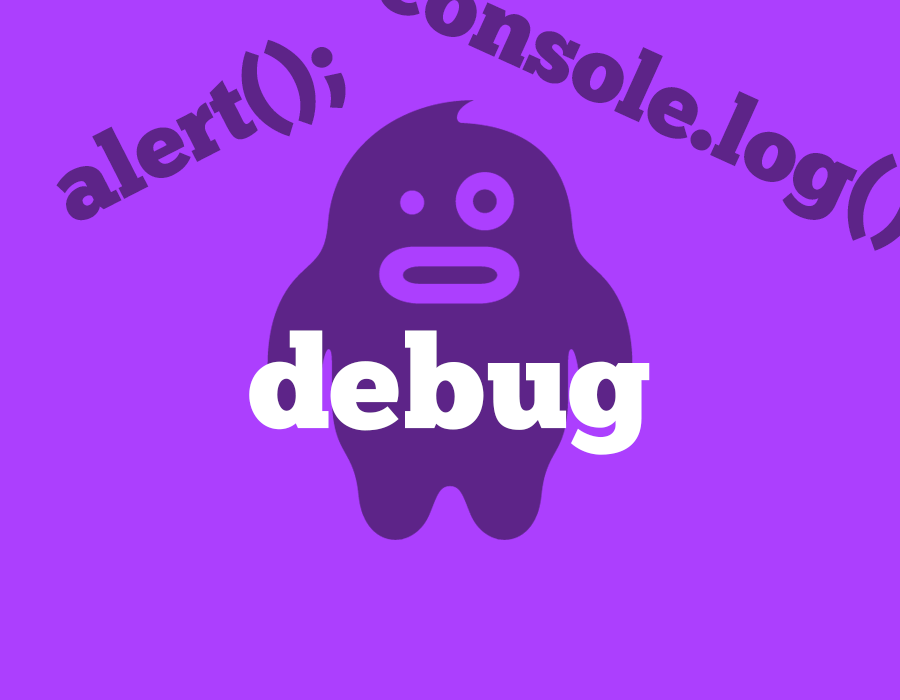
<style>
.page{position:relative;width:900px;height:700px;background:#ac3ffe}
.page>*{position:absolute;margin:0}
.t1{font:93.6px "ChunkFive-Roman";color:#5d2488}
.t2{font:129.9px "ChunkFive-Roman";color:#ffffff}
</style>
<div class="page">
<p class="t1" style="left:56px;top:39px;width:290px;height:182px;rotate:-27deg">alert();</p>
<p class="t2" style="left:249px;top:330px;width:401px;height:125px">debug</p>
</div>
